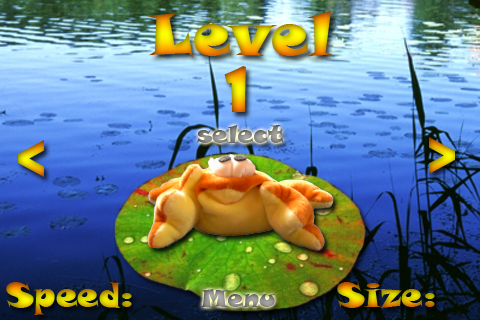
<style>
.page{position:relative;width:480px;height:320px}
.page>*{position:absolute;margin:0}
.t1{font:60px "SnapITC-Regular"}
.t2{font:60px "ShowcardGothic-Reg"}
.t3{font:25px "SnapITC-Regular"}
.t4{font:34px "SnapITC-Regular"}
</style>
<div class="page">
<p class="t1" style="left:148px;top:11px;width:185px;height:47px">Level</p>
<p class="t2" style="left:224px;top:66px;width:22px;height:46px">1</p>
<p class="t3" style="left:196px;top:125px;width:88px;height:18px">select</p>
<p class="t1" style="left:429px;top:137px;width:26px;height:37px">&gt;</p>
<p class="t1" style="left:18px;top:140px;width:26px;height:37px">&lt;</p>
<p class="t4" style="left:6px;top:282px;width:126px;height:33px">Speed:</p>
<p class="t3" style="left:200px;top:289px;width:75px;height:19px">Menu</p>
<p class="t4" style="left:337px;top:282px;width:98px;height:26px">Size:</p>
</div>
